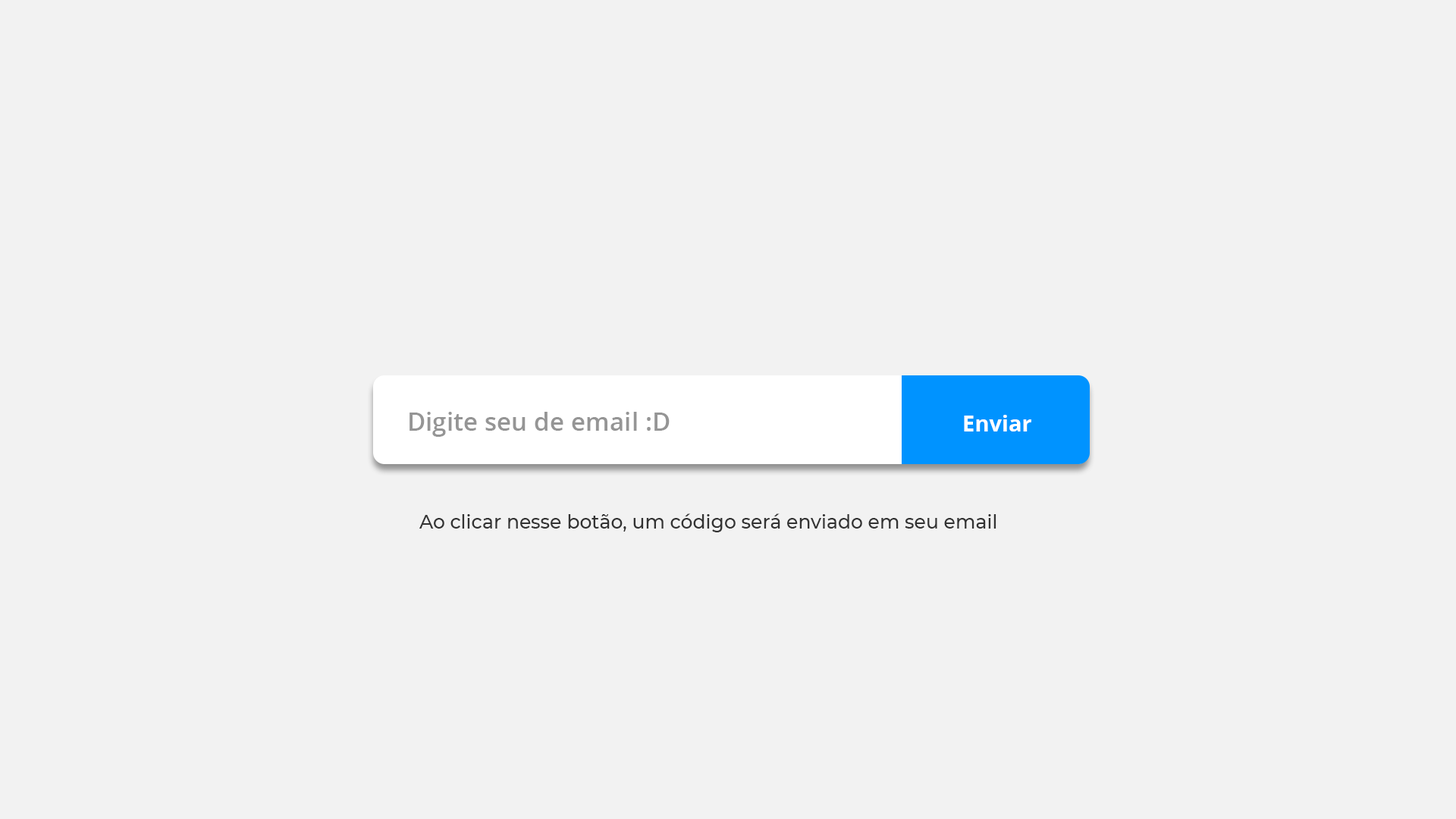
<style>
.page{position:relative;width:1456px;height:819px;background:#f2f2f2}
.page>*{position:absolute;margin:0}
.t1{font:25.3px "OpenSans-SemiBold";color:#959595}
.t2{font:22.1px "OpenSans-Bold";color:#ffffff}
.t3{font:19px "Montserrat-Medium";color:#333333}
</style>
<div class="page">
<p class="t1" style="left:409px;top:412px;width:261px;height:25px">Digite seu de email :D</p>
<p class="t2" style="left:964px;top:415px;width:67px;height:16px">Enviar</p>
<p class="t3" style="left:419px;top:513px;width:577px;height:19px">Ao clicar nesse botão, um código será enviado em seu email</p>
</div>
